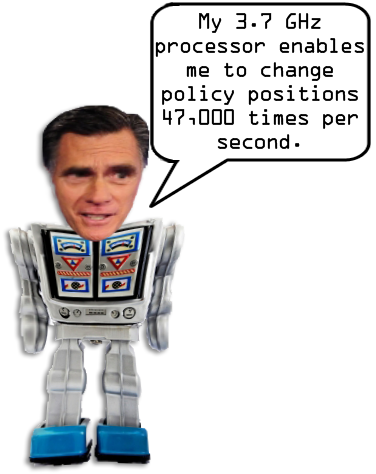
<style>
.page{position:relative;width:376px;height:474px;background:#ffffff}
.page>*{position:absolute;margin:0}
.t1{font:20px "OCRAStd";letter-spacing:-0.1em;color:#000000}
</style>
<div class="page">
<p class="t1" style="left:155px;top:13px;width:209px;height:136px;text-align:center">My 3.7 GHz processor enables me to change policy positions 47,000 times per second.</p>
</div>
